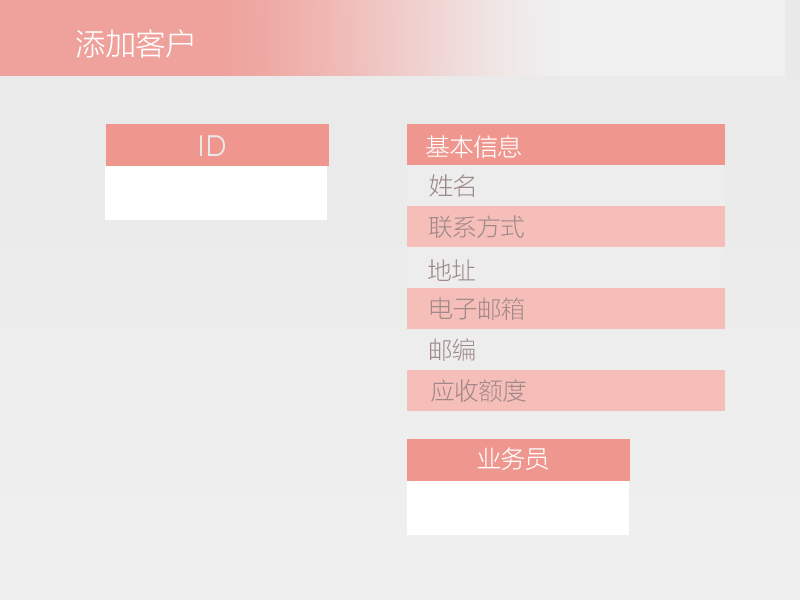
<style>
.page{position:relative;width:800px;height:600px}
.page>*{position:absolute;margin:0}
.t1{font:30px "MicrosoftYaHeiLight";color:#ffffff}
.t2{font:30px "SofiaProLight";color:#e9e9e9}
.t3{font:24px "MicrosoftYaHeiLight";color:#ffffff}
.t4{font:24px "MicrosoftYaHeiLight";color:#a08989}
</style>
<div class="page">
<p class="t1" style="left:76px;top:29px;width:117px;height:29px">添加客户</p>
<p class="t2" style="left:200px;top:135px;width:25px;height:21px">ID</p>
<p class="t3" style="left:426px;top:135px;width:95px;height:23px">基本信息</p>
<p class="t4" style="left:429px;top:174px;width:45px;height:23px">姓名</p>
<p class="t4" style="left:429px;top:215px;width:95px;height:23px">联系方式</p>
<p class="t4" style="left:428px;top:259px;width:47px;height:22px">地址</p>
<p class="t4" style="left:430px;top:297px;width:94px;height:23px">电子邮箱</p>
<p class="t4" style="left:430px;top:338px;width:45px;height:23px">邮编</p>
<p class="t4" style="left:431px;top:379px;width:95px;height:23px">应收额度</p>
<p class="t3" style="left:477px;top:447px;width:71px;height:23px">业务员</p>
</div>
